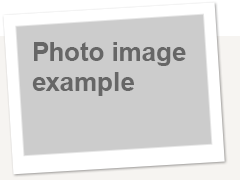
<style>
.page{position:relative;width:240px;height:180px;background:#cccccc}
.page>*{position:absolute;margin:0}
.t1{font:26px/30px "Arial-BoldMT";color:#666666}
</style>
<div class="page">
<p class="t1" style="left:32px;top:42px;width:154px;height:54px">Photo image<br>example</p>
</div>
